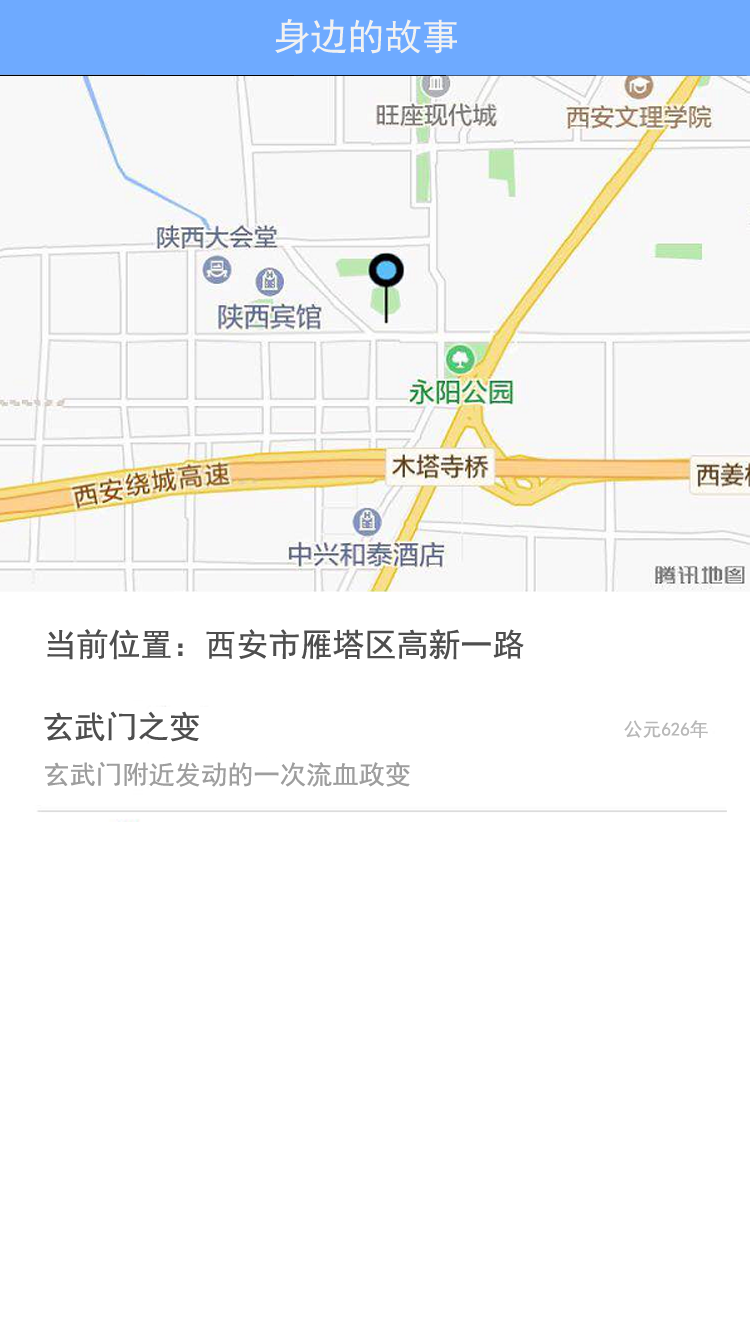
<style>
.page{position:relative;width:750px;height:1334px;background:#ffffff}
.page>*{position:absolute;margin:0}
.t1{font:37.2px "SimHei";color:#f1f1f1}
.t2{font:32px "SimHei";color:#4e4e4e}
.t3{font:31.6px "SimHei";color:#4e4e4e}
.t4{font:18.8px "SimHei";color:#b8b8b8}
.t5{font:26.3px "SimHei";color:#9e9e9e}
</style>
<div class="page">
<p class="t1" style="left:275px;top:19px;width:182px;height:35px">身边的故事</p>
<p class="t2" style="left:47px;top:629px;width:477px;height:31px">当前位置：西安市雁塔区高新一路</p>
<p class="t3" style="left:44px;top:711px;width:155px;height:31px">玄武门之变</p>
<p class="t4" style="left:624px;top:720px;width:84px;height:18px">公元626年</p>
<p class="t5" style="left:45px;top:761px;width:365px;height:26px">玄武门附近发动的一次流血政变</p>
</div>
